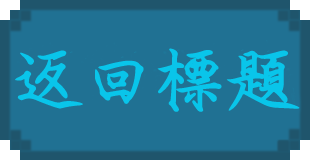
<style>
.page{position:relative;width:310px;height:160px;background:#207193}
.page>*{position:absolute;margin:0}
.t1{font:72px "HanWangWCL07";color:#09c5ea}
</style>
<div class="page">
<p class="t1" style="left:15px;top:48px;width:285px;height:64px">返回標題</p>
</div>
